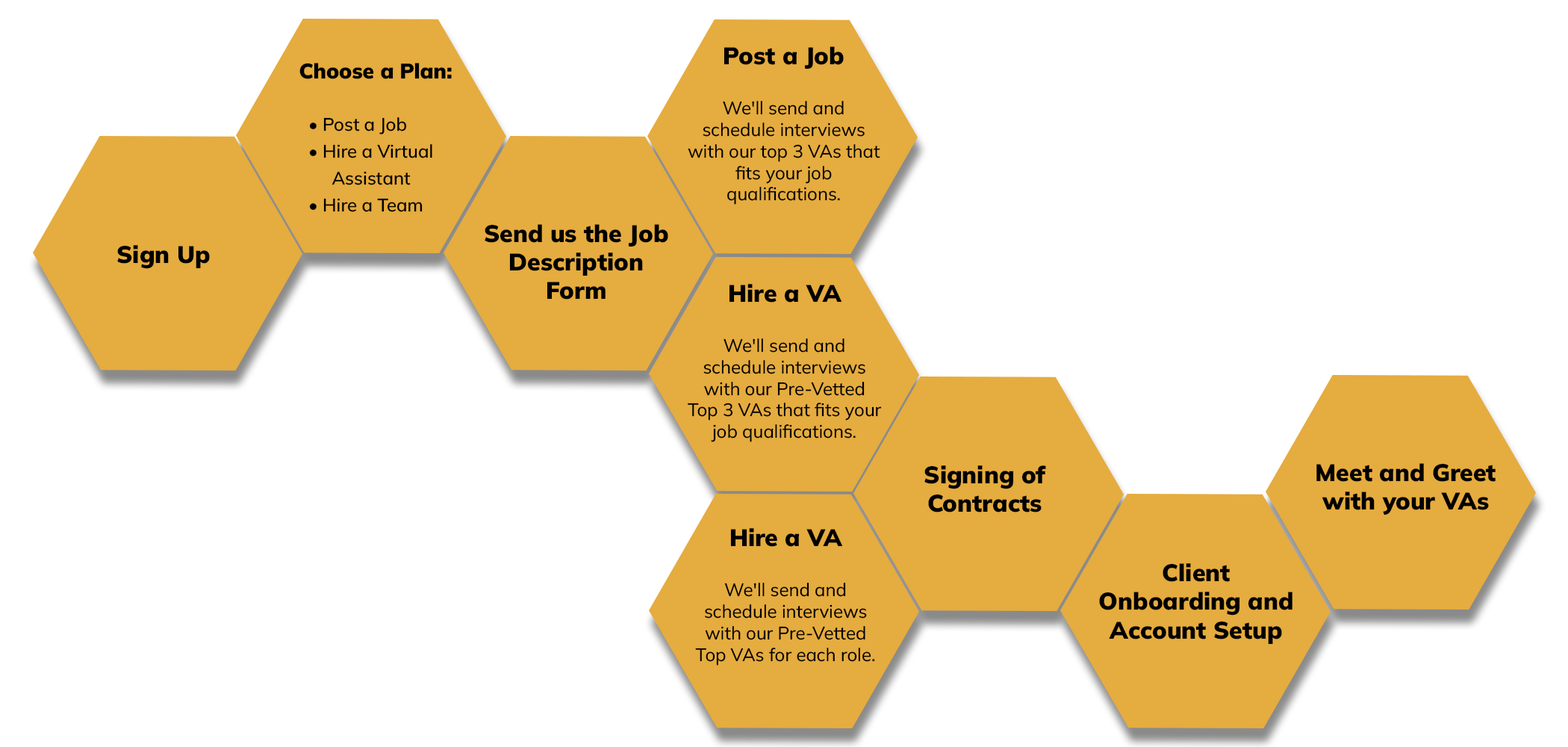
<style>
.page{position:relative;width:1568px;height:747px;background:#ffffff}
.page>*{position:absolute;margin:0}
.t1{font:17.9px "MulishRoman-Regular";color:#000000}
.t2{font:23.9px "MulishRoman-Black";color:#000000}
.t3{font:17.9px/26.9px "MulishRoman-Medium";color:#000000}
.t4{font:20.9px "MulishRoman-Black";color:#000000}
</style>
<div class="page">
<p class="t1" style="left:688px;top:46px;width:192px;height:159px;text-align:center"><span class="t2">Post a Job<br><br></span>We'll send and schedule interviews with our top 3 VAs that fits your job qualifications.</p>
<p class="t3" style="left:299px;top:63px;width:153px;height:149px;text-align:center"><span class="t4">Choose a Plan:<br><br></span>   • Post a Job<br>   • Hire a Virtual<br>        Assistant<br>   • Hire a Team</p>
<p class="t2" style="left:485px;top:224px;width:183px;height:75px;text-align:center">Send us the Job Description Form</p>
<p class="t2" style="left:117px;top:245px;width:93px;height:24px">Sign Up</p>
<p class="t1" style="left:688px;top:284px;width:194px;height:158px;text-align:center"><span class="t2">Hire a VA<br><br></span>We'll send and schedule interviews with our Pre-Vetted Top 3 VAs that fits your job qualifications.</p>
<p class="t2" style="left:924px;top:465px;width:122px;height:47px;text-align:center">Signing of Contracts</p>
<p class="t2" style="left:1316px;top:463px;width:180px;height:52px;text-align:center">Meet and Greet with your VAs</p>
<p class="t1" style="left:695px;top:528px;width:180px;height:137px;text-align:center"><span class="t2">Hire a VA<br><br></span>We'll send and schedule interviews with our Pre-Vetted Top VAs for each role.</p>
<p class="t2" style="left:1099px;top:563px;width:193px;height:81px;text-align:center">Client Onboarding and Account Setup</p>
</div>
